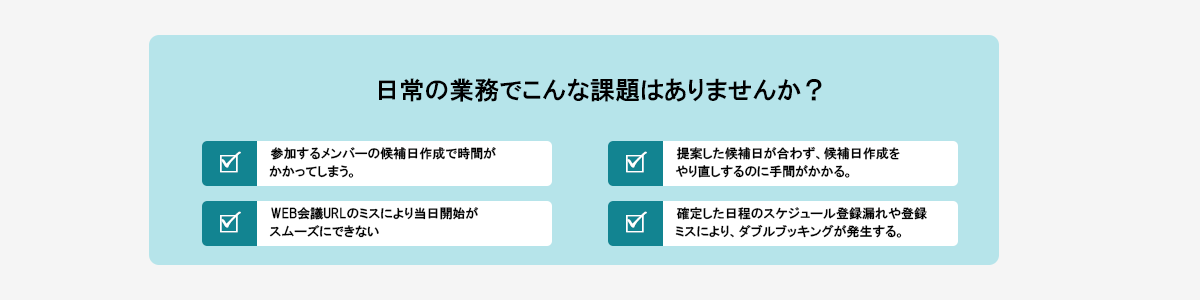
<style>
.page{position:relative;width:1200px;height:300px;background:#f5f5f5}
.page>*{position:absolute;margin:0}
.t1{font:25px "HGPGothicE";color:#000000}
.t2{font:13px/18px "HGPGothicE";color:#000000}
.t3{font:20px "KozGoPr6N-Regular";color:#ffffff;font-weight:bold}
.t4{font:30px "KozGoPr6N-Regular";color:#ffffff}
</style>
<div class="page">
<p class="t1" style="left:379px;top:78px;width:443px;height:24px">日常の業務でこんな課題はありませんか？</p>
<p class="t2" style="left:269px;top:147px;width:227px;height:31px">参加するメンバーの候補日作成で時間が<br> かかってしまう。</p>
<p class="t2" style="left:675px;top:146px;width:225px;height:32px">提案した候補日が合わず、候補日作成を<br> やり直しするのに手間がかかる。</p>
<p class="t3" style="left:220px;top:155px;width:18px;height:18px">□</p>
<p class="t4" style="left:221px;top:151px;width:20px;height:17px;rotate:10deg">✓</p>
<p class="t3" style="left:626px;top:155px;width:18px;height:18px">□</p>
<p class="t4" style="left:627px;top:151px;width:20px;height:17px;rotate:10deg">✓</p>
<p class="t2" style="left:269px;top:207px;width:210px;height:31px">WEB会議URLのミスにより当日開始が<br> スムーズにできない</p>
<p class="t2" style="left:675px;top:207px;width:252px;height:31px">確定した日程のスケジュール登録漏れや登録<br> ミスにより、ダブルブッキングが発生する。</p>
<p class="t3" style="left:220px;top:215px;width:18px;height:18px">□</p>
<p class="t4" style="left:221px;top:211px;width:20px;height:17px;rotate:10deg">✓</p>
<p class="t3" style="left:626px;top:215px;width:18px;height:18px">□</p>
<p class="t4" style="left:627px;top:211px;width:20px;height:17px;rotate:10deg">✓</p>
</div>
